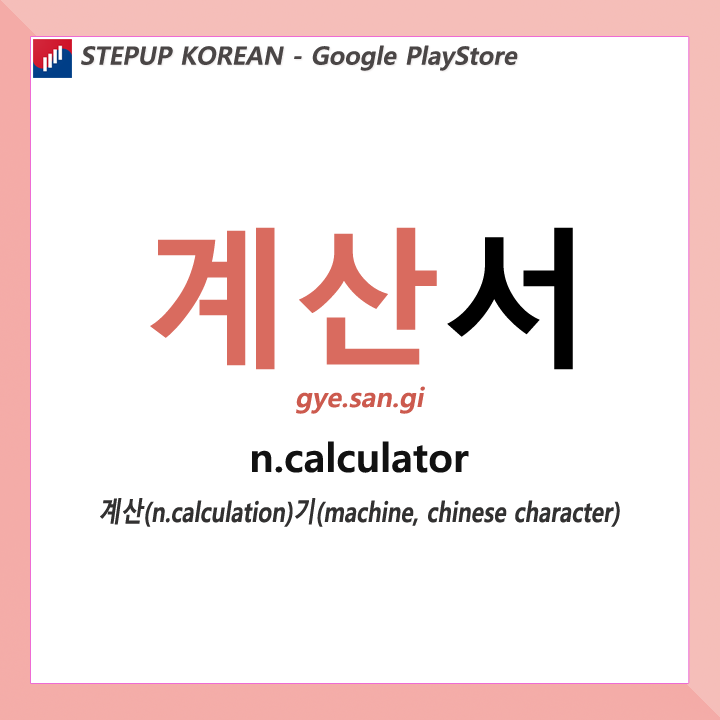
<style>
.page{position:relative;width:720px;height:720px;background:#ffffff}
.page>*{position:absolute;margin:0}
.t1{font:25px "MalgunGothicBold";color:#4a4646;font-style:italic}
.t2{font:150px "MalgunGothicBold";color:#d96b5f}
.t3{font:150px "MalgunGothicBold";color:#000000}
.t4{font:27px "MalgunGothicBold";color:#cc5a4e;font-style:italic}
.t5{font:40px "MalgunGothicBold";color:#111111}
.t6{font:28px "MalgunGothicBold";color:#323131;font-style:italic;scale:0.8 1}
</style>
<div class="page">
<p class="t1" style="left:81px;top:45px;width:437px;height:26px">STEPUP KOREAN - Google PlayStore</p>
<p class="t2" style="left:150px;top:227px;width:423px;height:143px">계산<span class="t3">서</span></p>
<p class="t4" style="left:296px;top:386px;width:129px;height:28px">gye.san.gi</p>
<p class="t5" style="left:252px;top:441px;width:217px;height:32px">n.calculator</p>
<p class="t6" style="left:100px;top:498px;width:520px;height:29px">계산(n.calculation)기(machine, chinese character)</p>
</div>
